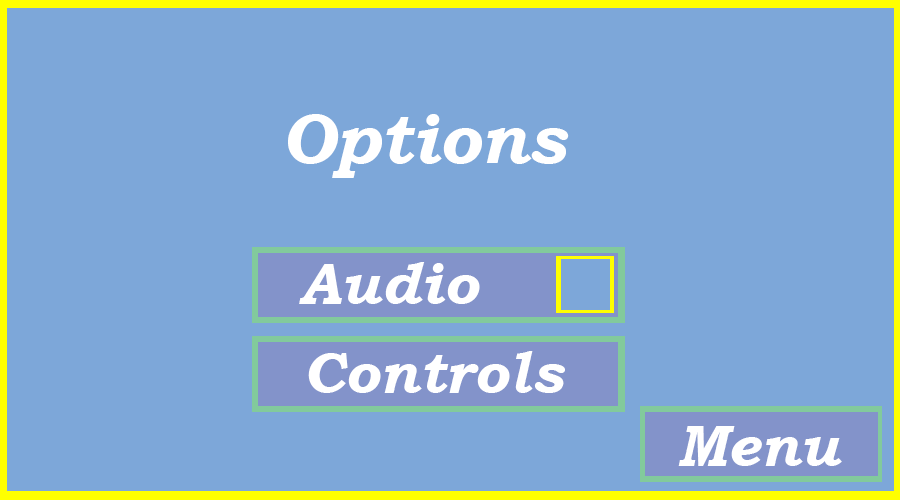
<style>
.page{position:relative;width:900px;height:500px;background:#7da7d9}
.page>*{position:absolute;margin:0}
.t1{font:70px "BookmanOldStyle-BoldItalic";color:#ffffff}
.t2{font:58.3px "BookmanOldStyle-BoldItalic";color:#ffffff}
</style>
<div class="page">
<p class="t1" style="left:288px;top:114px;width:281px;height:64px">Options</p>
<p class="t2" style="left:299px;top:262px;width:181px;height:42px">Audio</p>
<p class="t2" style="left:308px;top:351px;width:257px;height:42px">Controls</p>
<p class="t2" style="left:678px;top:426px;width:164px;height:40px">Menu</p>
</div>
